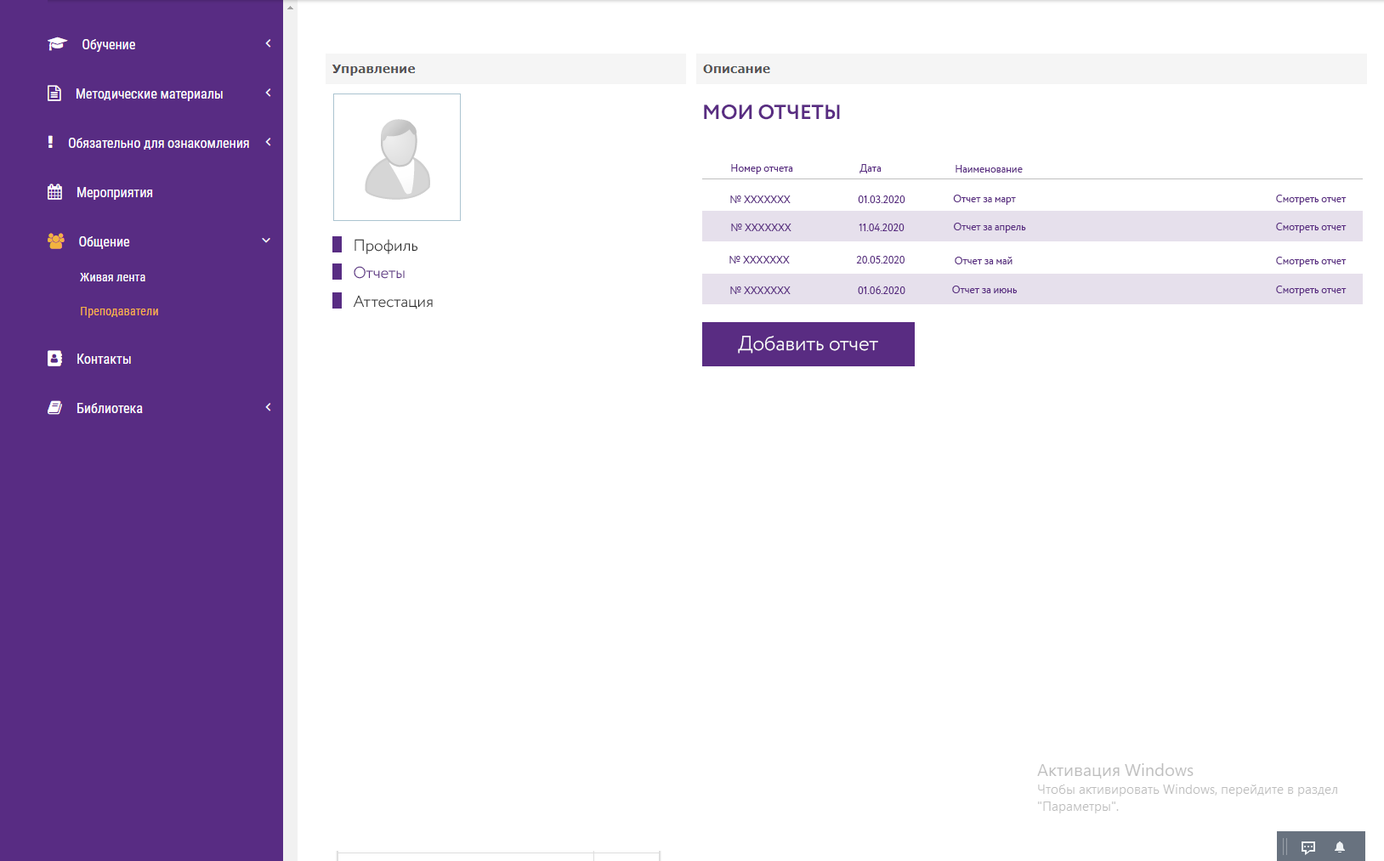
<style>
.page{position:relative;width:1384px;height:861px;background:#ffffff}
.page>*{position:absolute;margin:0}
.t1{font:20.4px "Circe-Bold";color:#592c82;text-transform:uppercase}
.t2{font:10.2px "Circe-Regular";color:#592c81}
.t3{font:15.9px "Circe-Light";color:#272727}
.t4{font:15.9px "Circe-Light";color:#592c82}
.t5{font:20.4px "Circe-Light";color:#ffffff}
</style>
<div class="page">
<p class="t1" style="left:704px;top:105px;width:136px;height:15px">Мои Отчеты</p>
<p class="t2" style="left:731px;top:164px;width:62px;height:10px">Номер отчета</p>
<p class="t2" style="left:860px;top:164px;width:22px;height:9px">Дата</p>
<p class="t2" style="left:956px;top:165px;width:67px;height:8px">Наименование</p>
<p class="t2" style="left:730px;top:196px;width:61px;height:7px">№ ХХХХХХХ</p>
<p class="t2" style="left:858px;top:196px;width:48px;height:7px">01.03.2020</p>
<p class="t2" style="left:953px;top:195px;width:63px;height:10px">Отчет за март</p>
<p class="t2" style="left:1276px;top:195px;width:71px;height:10px">Смотреть отчет</p>
<p class="t2" style="left:731px;top:224px;width:61px;height:7px">№ ХХХХХХХ</p>
<p class="t2" style="left:859px;top:224px;width:46px;height:7px">11.04.2020</p>
<p class="t2" style="left:954px;top:223px;width:72px;height:10px">Отчет за апрель</p>
<p class="t2" style="left:1276px;top:223px;width:71px;height:10px">Смотреть отчет</p>
<p class="t3" style="left:355px;top:239px;width:63px;height:15px">Профиль</p>
<p class="t2" style="left:730px;top:256px;width:60px;height:8px">№ ХХХХХХХ</p>
<p class="t2" style="left:856px;top:256px;width:49px;height:8px">20.05.2020</p>
<p class="t2" style="left:955px;top:257px;width:58px;height:7px">Отчет за май</p>
<p class="t2" style="left:1276px;top:257px;width:71px;height:10px">Смотреть отчет</p>
<p class="t4" style="left:354px;top:266px;width:51px;height:13px">Отчеты</p>
<p class="t2" style="left:730px;top:287px;width:61px;height:7px">№ ХХХХХХХ</p>
<p class="t2" style="left:858px;top:286px;width:48px;height:8px">01.06.2020</p>
<p class="t2" style="left:952px;top:286px;width:66px;height:7px">Отчет за июнь</p>
<p class="t2" style="left:1276px;top:286px;width:71px;height:10px">Смотреть отчет</p>
<p class="t3" style="left:353px;top:295px;width:80px;height:15px">Аттестация</p>
<p class="t5" style="left:738px;top:336px;width:140px;height:18px">Добавить отчет</p>
</div>
